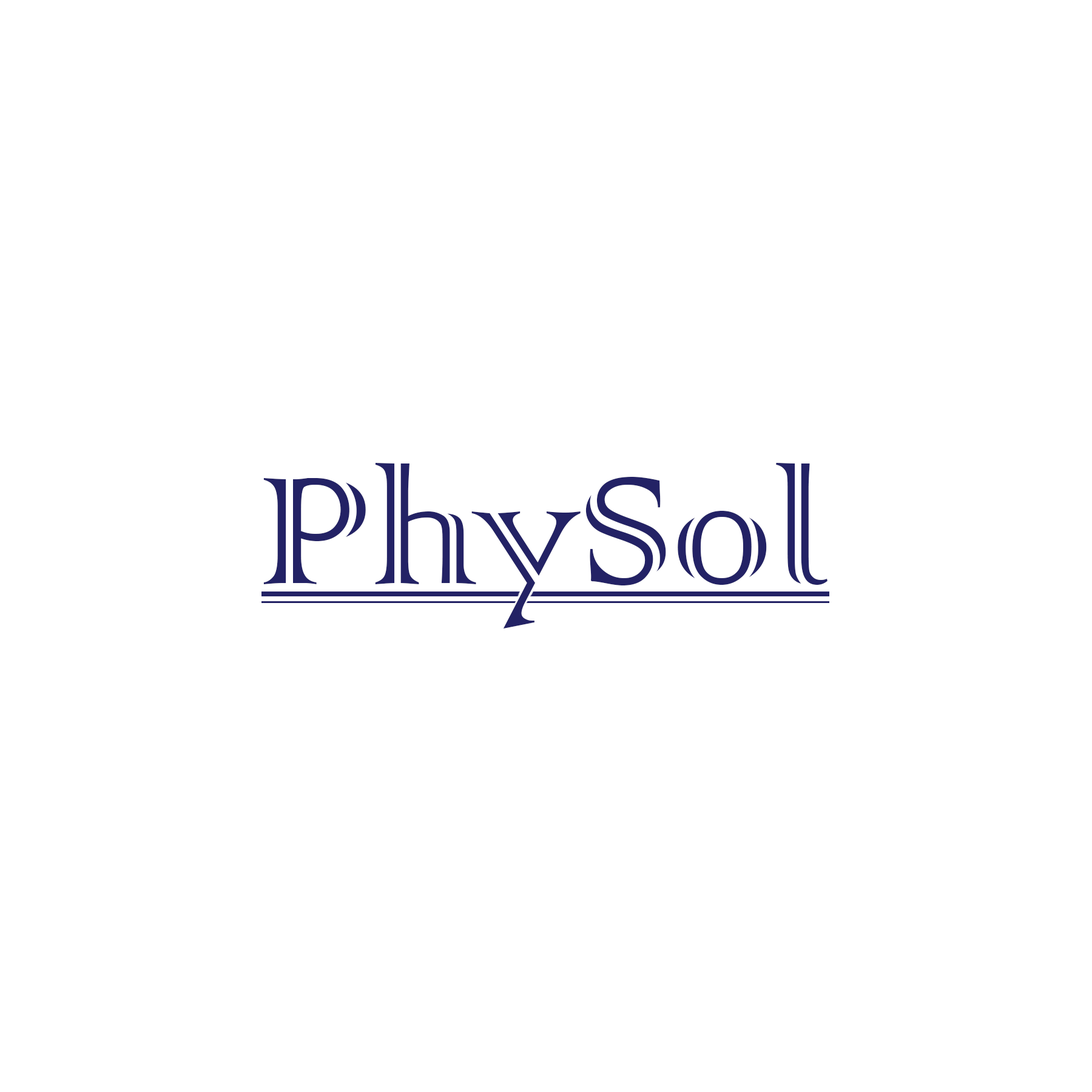
<style>
.page{position:relative;width:1092px;height:1092px;background:#ffffff}
.page>*{position:absolute;margin:0}
.t1{font:202.2px "ColonnaMT";color:#232265}
</style>
<div class="page">
<p class="t1" style="left:263px;top:463px;width:564px;height:165px">PhySol</p>
</div>
